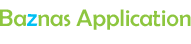
<style>
.page{position:relative;width:191px;height:44px;background:#ffffff}
.page>*{position:absolute;margin:0}
.t1{font:24px "BerlinSansFB-Reg";color:#8dc63f}
.t2{font:26px "BerlinSansFB-Reg";color:#00bff3}
</style>
<div class="page">
<p class="t1" style="left:0px;top:9px;width:191px;height:21px">Ba<span class="t2">z</span>nas Application</p>
</div>
